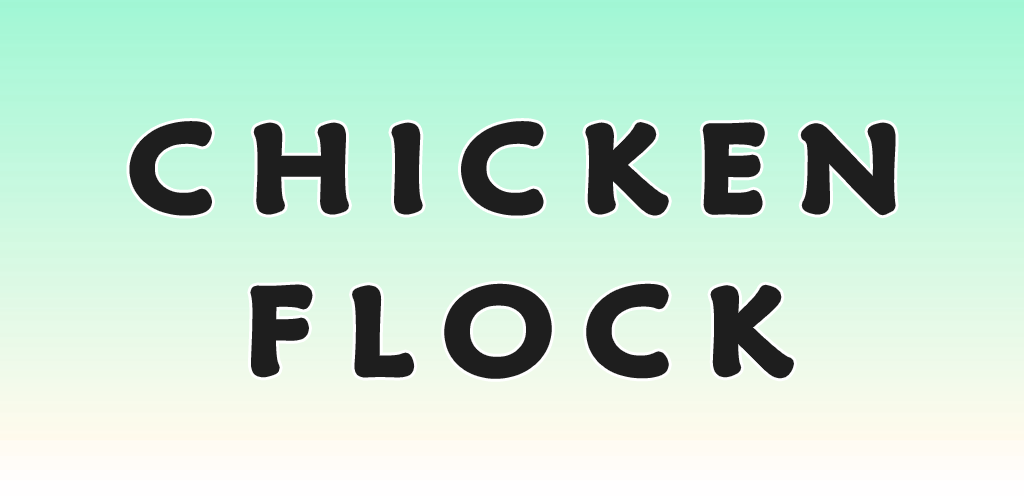
<style>
.page{position:relative;width:1024px;height:500px}
.page>*{position:absolute;margin:0}
.t1{font:112.1px/162.7px "MaiandraGD-Regular";letter-spacing:0.28em;color:#1e1e1e;font-weight:bold;scale:1.11 1}
</style>
<div class="page">
<p class="t1" style="left:135px;top:127px;width:755px;height:246px;text-align:center">CHICKEN<br>FLOCK</p>
</div>
